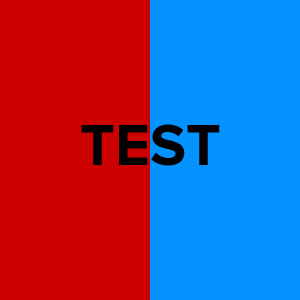
<style>
.page{position:relative;width:300px;height:300px;background:#cc0000}
.page>*{position:absolute;margin:0}
.t1{font:60px "ProximaNova-Bold";color:#000101}
</style>
<div class="page">
<p class="t1" style="left:81px;top:124px;width:139px;height:42px">TEST</p>
</div>
